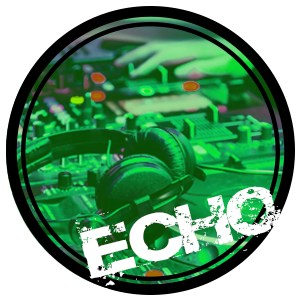
<style>
.page{position:relative;width:300px;height:300px;background:#ffffff}
.page>*{position:absolute;margin:0}
.t1{font:60px "Base02";color:#ffffff;scale:1.2 1}
</style>
<div class="page">
<p class="t1" style="left:75px;top:186px;width:206px;height:105px;rotate:-15deg">Echo</p>
</div>
